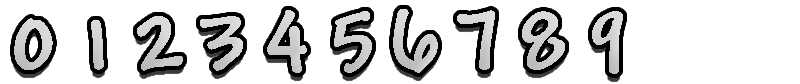
<style>
.page{position:relative;width:800px;height:84px;background:#ffffff}
.page>*{position:absolute;margin:0}
.t1{font:96.6px "Andy-Bold";letter-spacing:-0.01em;color:#cdcdcd}
.t2{font:96.6px "Andy-Bold";letter-spacing:-0.01em;color:#d4d4d3}
.t3{font:88.9px "Andy-Bold";letter-spacing:-0.01em;color:#cecece}
.t4{font:88.9px "Andy-Bold";letter-spacing:-0.01em;color:#d1d1d1}
.t5{font:96.6px "Andy-Bold";letter-spacing:-0.01em;color:#d0d0d0}
.t6{font:88.9px "Andy-Bold";letter-spacing:-0.01em;color:#d2d2d3}
.t7{font:96.6px "Andy-Bold";letter-spacing:-0.01em;color:#d1d1d1}
.t8{font:96.6px "Andy-Bold";letter-spacing:-0.01em;color:#cfcfcf}
</style>
<div class="page">
<p class="t1" style="left:137px;top:16px;width:46px;height:55px">2</p>
<p class="t2" style="left:200px;top:16px;width:43px;height:55px">3</p>
<p class="t3" style="left:267px;top:10px;width:40px;height:63px">4</p>
<p class="t4" style="left:334px;top:11px;width:38px;height:62px">5</p>
<p class="t5" style="left:522px;top:11px;width:43px;height:59px">8</p>
<p class="t6" style="left:592px;top:11px;width:31px;height:63px">9</p>
<p class="t7" style="left:14px;top:18px;width:39px;height:52px">0</p>
<p class="t8" style="left:91px;top:20px;width:13px;height:50px">1</p>
</div>
